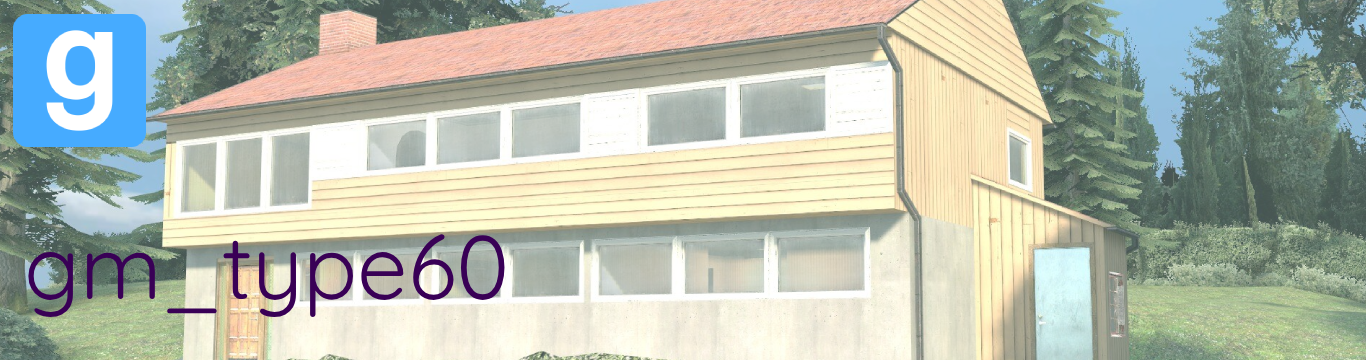
<style>
.page{position:relative;width:1366px;height:360px}
.page>*{position:absolute;margin:0}
.t1{font:89.7px "Quicksand-Regular";color:#390056}
</style>
<div class="page">
<p class="t1" style="left:28px;top:234px;width:477px;height:83px">gm_type60</p>
</div>
